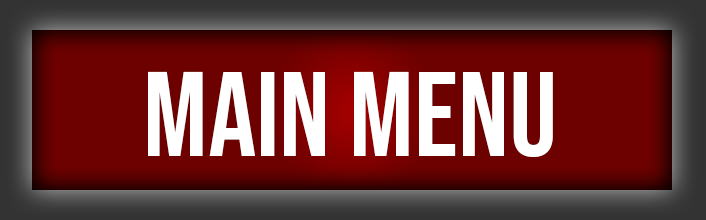
<style>
.page{position:relative;width:706px;height:220px;background:#6d0100}
.page>*{position:absolute;margin:0}
.t1{font:120px "BebasNeue-Regular";color:#ffffff}
</style>
<div class="page">
<p class="t1" style="left:148px;top:71px;width:405px;height:86px">Main menu</p>
</div>
